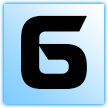
<style>
.page{position:relative;width:108px;height:108px;background:#000000}
.page>*{position:absolute;margin:0}
.t1{font:150px "ROBOTECHGP";color:#000000}
</style>
<div class="page">
<p class="t1" style="left:21px;top:15px;width:66px;height:74px">6</p>
</div>
